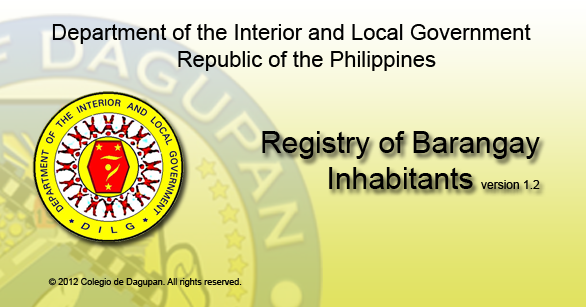
<style>
.page{position:relative;width:586px;height:307px}
.page>*{position:absolute;margin:0}
.t1{font:22px "ArialMT";color:#010101}
.t2{font:30px "ArialMT";color:#000000}
.t3{font:12px "ArialMT";color:#000000}
.t4{font:9px "ArialMT";color:#010101}
</style>
<div class="page">
<p class="t1" style="left:52px;top:24px;width:479px;height:47px;text-align:center">Department of the Interior and Local Government<br>     Republic of the Philippines</p>
<p class="t2" style="left:262px;top:131px;width:278px;height:58px">Registry of Barangay<br>        Inhabitants <span class="t3">version 1.2</span></p>
<p class="t4" style="left:48px;top:278px;width:194px;height:9px">© 2012 Colegio de Dagupan. All rights reserved.</p>
</div>
